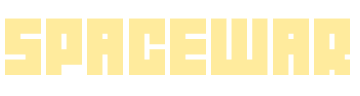
<style>
.page{position:relative;width:360px;height:96px;background:#ffffff}
.page>*{position:absolute;margin:0}
.t1{font:72px "04b19";color:#ffeb9d}
</style>
<div class="page">
<p class="t1" style="left:5px;top:18px;width:345px;height:57px">SPACEWAR</p>
</div>
